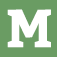
<style>
.page{position:relative;width:57px;height:57px;background:#6a9c63}
.page>*{position:absolute;margin:0}
.t1{font:52.8px "Bitter-Bold";color:#ffffff;font-weight:bold}
</style>
<div class="page">
<p class="t1" style="left:7px;top:9px;width:44px;height:39px">M</p>
</div>
